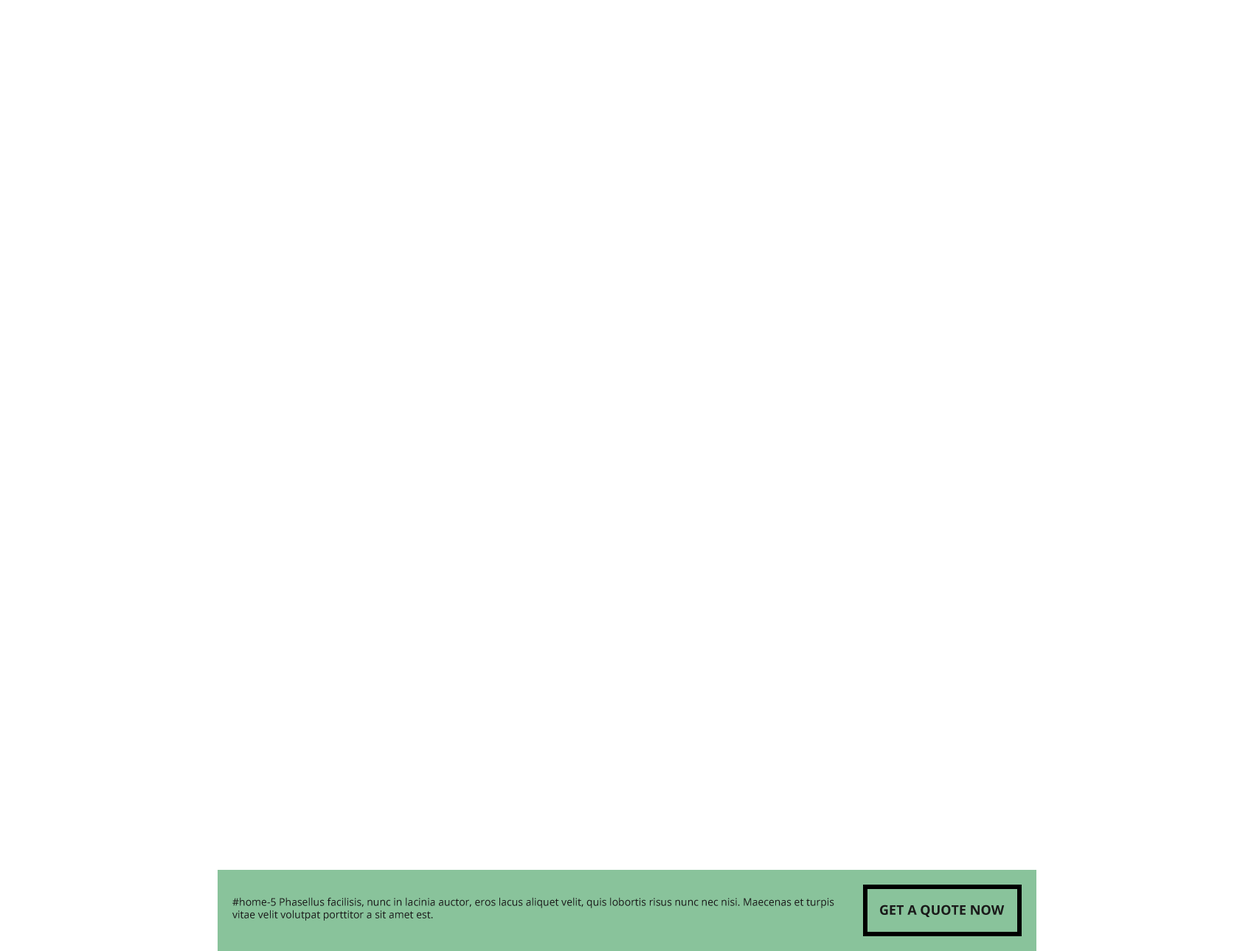
<style>
.page{position:relative;width:1254px;height:951px;background:#ffffff}
.page>*{position:absolute;margin:0}
.t1{font:10.3px "OpenSans";color:#1a1a1a}
.t2{font:13.3px "OpenSans-Bold";color:#1a1a1a;text-transform:uppercase}
</style>
<div class="page">
<p class="t1" style="left:232px;top:897px;width:602px;height:24px">#home-5 Phasellus facilisis, nunc in lacinia auctor, eros lacus aliquet velit, quis lobortis risus nunc nec nisi. Maecenas et turpis vitae velit volutpat porttitor a sit amet est.</p>
<p class="t2" style="left:880px;top:904px;width:125px;height:13px">Get a quote now</p>
</div>
